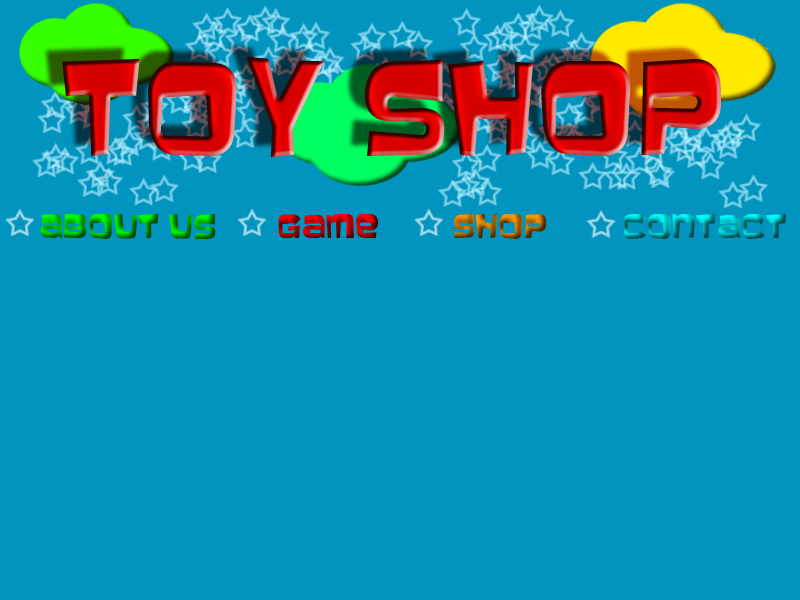
<style>
.page{position:relative;width:800px;height:600px;background:#0094be}
.page>*{position:absolute;margin:0}
.t1{font:115.5px "Baveuse"}
.t2{font:30px "Baveuse"}
</style>
<div class="page">
<p class="t1" style="left:62px;top:57px;width:659px;height:100px">TOY Shop</p>
<p class="t2" style="left:40px;top:214px;width:176px;height:25px">About us</p>
<p class="t2" style="left:278px;top:214px;width:100px;height:24px">Game</p>
<p class="t2" style="left:453px;top:214px;width:93px;height:25px">Shop</p>
</div>
